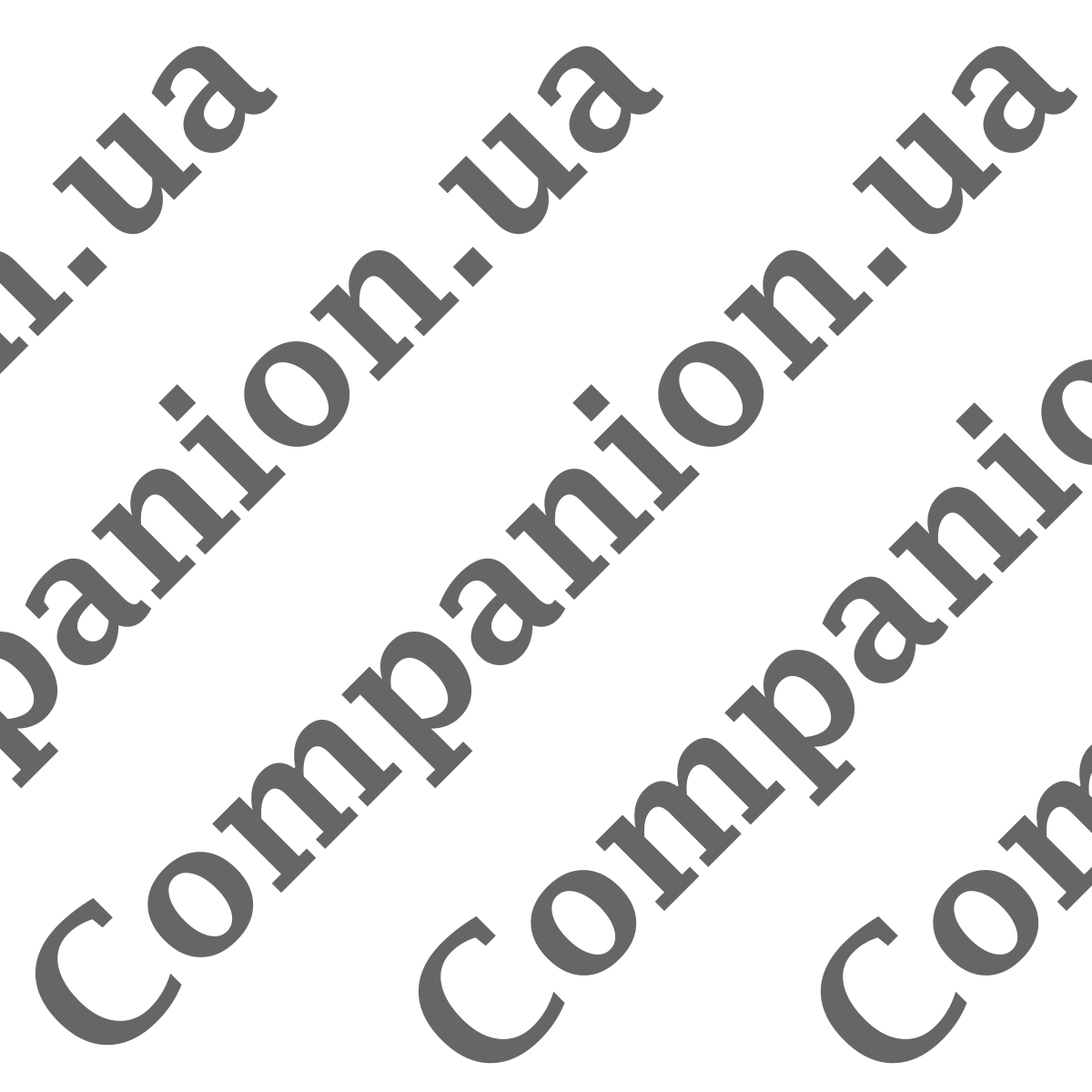
<style>
.page{position:relative;width:1092px;height:1092px;background:#ffffff}
.page>*{position:absolute;margin:0}
.t1{font:182px "LucidaFax-Demi";color:#666666}
</style>
<div class="page">
<p class="t1" style="left:35px;top:45px;width:1043px;height:1001px;rotate:-45deg">Companion.ua</p>
</div>
